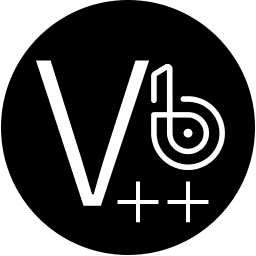
<style>
.page{position:relative;width:256px;height:256px;background:#000000}
.page>*{position:absolute;margin:0}
.t1{font:198.9px "YuGothic-Regular";color:#ffffff}
.t2{font:67.1px "YuGothic-Bold";color:#ffffff}
</style>
<div class="page">
<p class="t1" style="left:36px;top:60px;width:113px;height:146px">V</p>
<p class="t2" style="left:117px;top:181px;width:92px;height:42px">++</p>
</div>
